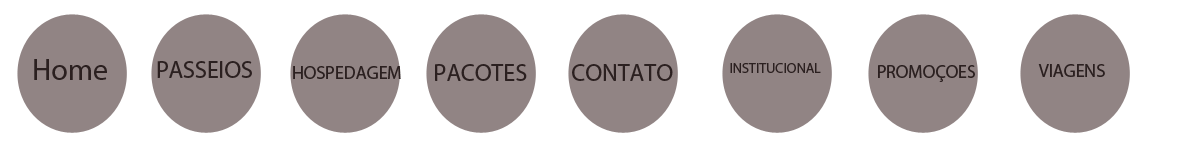
<style>
.page{position:relative;width:1180px;height:160px;background:#ffffff}
.page>*{position:absolute;margin:0}
.t1{font:30px "MyriadPro-Regular";color:#2b2020}
.t2{font:24px "MyriadPro-Regular";color:#2b2020}
.t3{font:14px "MyriadPro-Regular";color:#2b2020}
.t4{font:18px "MyriadPro-Regular";color:#2b2020}
</style>
<div class="page">
<p class="t1" style="left:34px;top:59px;width:73px;height:21px">Home</p>
<p class="t2" style="left:157px;top:61px;width:95px;height:17px">PASSEIOS</p>
<p class="t2" style="left:435px;top:64px;width:92px;height:17px">PACOTES</p>
<p class="t2" style="left:572px;top:64px;width:101px;height:17px">CONTATO</p>
<p class="t3" style="left:730px;top:63px;width:91px;height:10px">INSTITUCIONAL</p>
<p class="t4" style="left:878px;top:65px;width:97px;height:17px">PROMOÇOES</p>
<p class="t4" style="left:1038px;top:64px;width:67px;height:13px">VIAGENS</p>
<p class="t4" style="left:293px;top:66px;width:108px;height:13px">HOSPEDAGEM</p>
</div>
